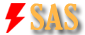
<style>
.page{position:relative;width:85px;height:35px;background:#ffffff}
.page>*{position:absolute;margin:0}
.t1{font:34px "GloucesterMT-ExtraCondensed";color:#ffb749;scale:1.25 1}
</style>
<div class="page">
<p class="t1" style="left:30px;top:3px;width:48px;height:27px">SAS</p>
</div>
